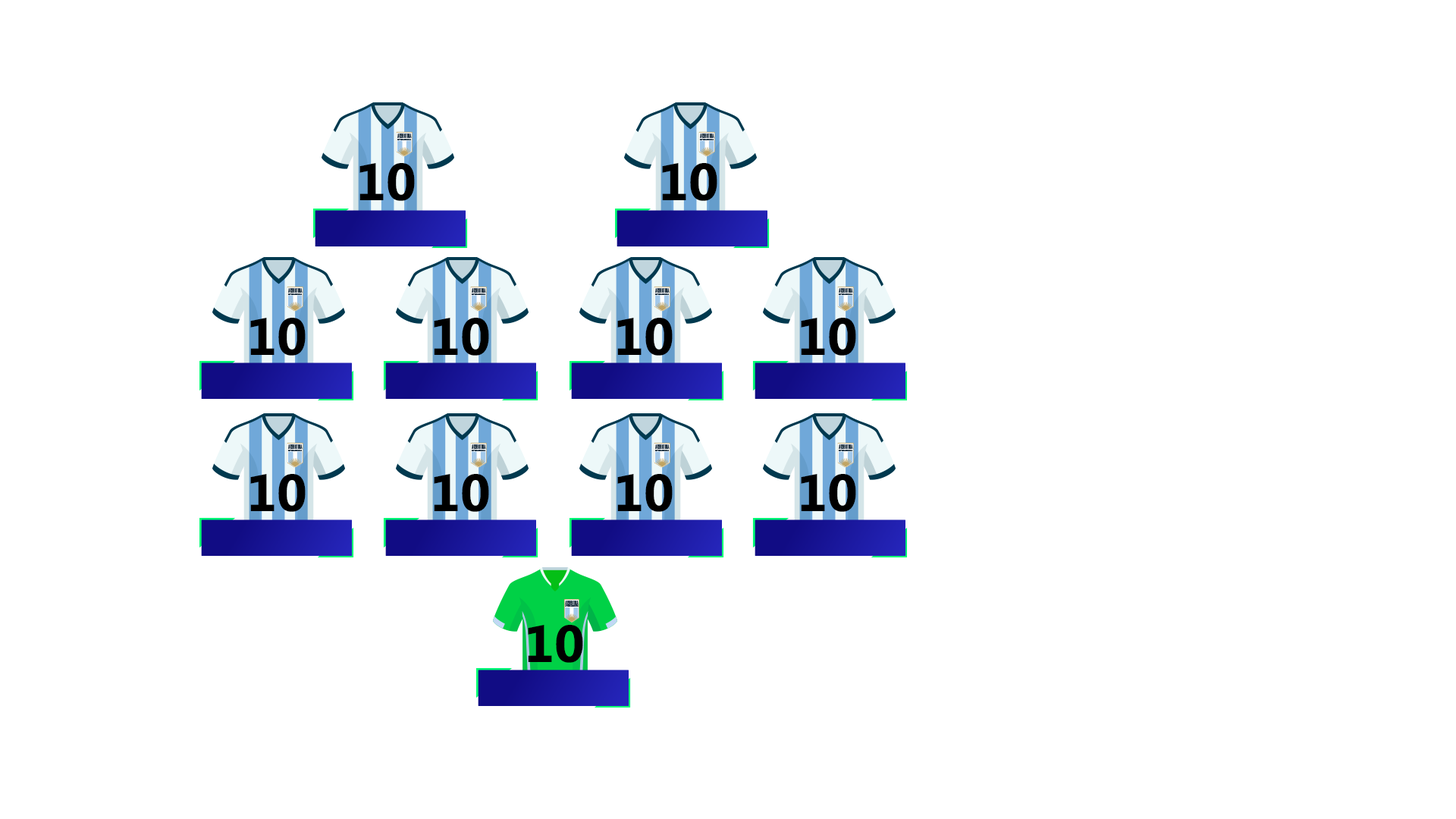
<style>
.page{position:relative;width:1456px;height:819px;background:#ffffff}
.page>*{position:absolute;margin:0}
.t1{font:52.2px "Segoe-Bold";color:#000000}
</style>
<div class="page">
<p class="t1" style="left:359px;top:163px;width:56px;height:38px">10</p>
<p class="t1" style="left:662px;top:163px;width:55px;height:38px">10</p>
<p class="t1" style="left:250px;top:318px;width:56px;height:38px">10</p>
<p class="t1" style="left:434px;top:318px;width:55px;height:38px">10</p>
<p class="t1" style="left:617px;top:318px;width:56px;height:38px">10</p>
<p class="t1" style="left:801px;top:318px;width:55px;height:38px">10</p>
<p class="t1" style="left:250px;top:474px;width:56px;height:38px">10</p>
<p class="t1" style="left:434px;top:474px;width:55px;height:38px">10</p>
<p class="t1" style="left:617px;top:474px;width:56px;height:38px">10</p>
<p class="t1" style="left:801px;top:474px;width:55px;height:38px">10</p>
<p class="t1" style="left:528px;top:625px;width:55px;height:38px">10</p>
</div>
